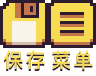
<style>
.page{position:relative;width:96px;height:76px;background:#f7db53}
.page>*{position:absolute;margin:0}
.t1{font:20px "PingFang-SC-Bold";letter-spacing:0.1em;color:#f7db53}
</style>
<div class="page">
<p class="t1" style="left:3px;top:50px;width:42px;height:19px">保存</p>
<p class="t1" style="left:52px;top:50px;width:41px;height:20px">菜单</p>
</div>
